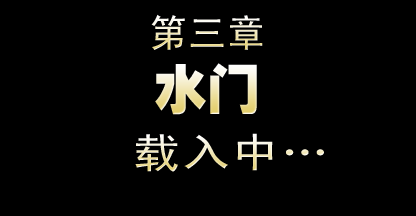
<style>
.page{position:relative;width:416px;height:216px;background:#000000}
.page>*{position:absolute;margin:0}
.t1{font:38px "SimHei";letter-spacing:0.03em;text-transform:uppercase}
.t2{font:53px "HeitiEG-Ultra-GB";text-transform:uppercase}
.t3{font:40.9px "SimHei";letter-spacing:0.03em;scale:1.18 1}
</style>
<div class="page">
<p class="t1" style="left:151px;top:14px;width:112px;height:36px">第三章</p>
<p class="t2" style="left:155px;top:63px;width:102px;height:52px">水门</p>
<p class="t3" style="left:135px;top:133px;width:189px;height:39px">载入中…</p>
</div>
